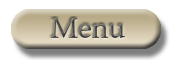
<style>
.page{position:relative;width:172px;height:60px;background:#ffffff}
.page>*{position:absolute;margin:0}
.t1{font:32px "AdobeDevanagari-Regular";color:#494a4d;scale:1.09 1}
</style>
<div class="page">
<p class="t1" style="left:50px;top:18px;width:75px;height:20px">Menu</p>
</div>
